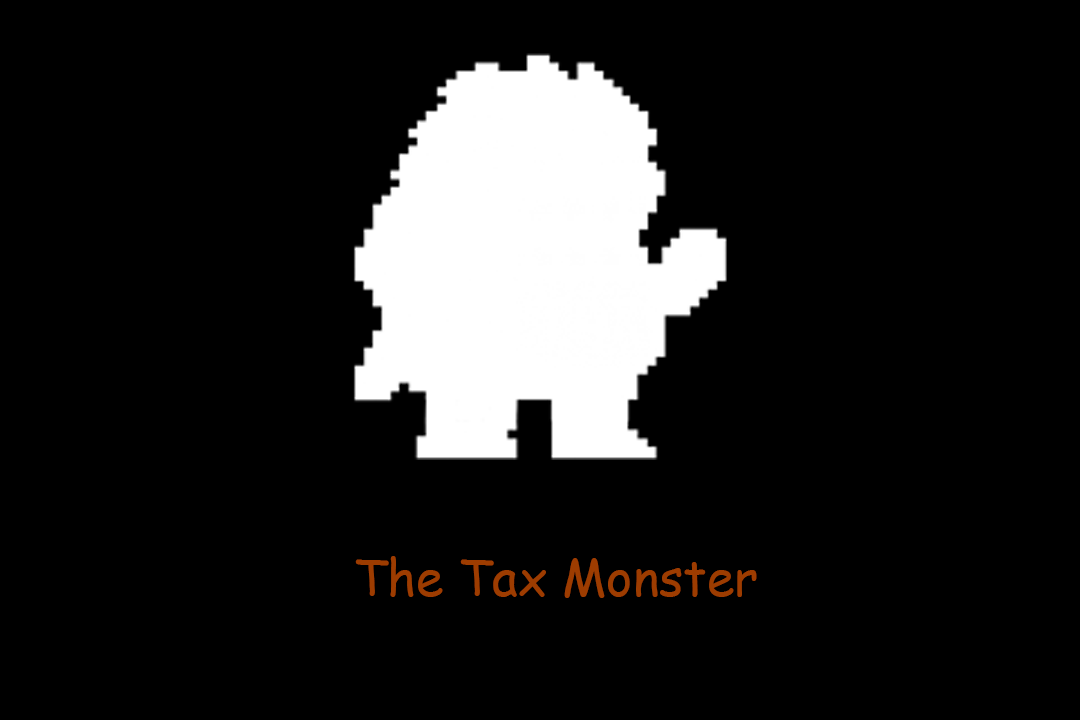
<style>
.page{position:relative;width:1080px;height:720px;background:#000000}
.page>*{position:absolute;margin:0}
.t1{font:50px "ComicSansMS";color:#9d3c00}
</style>
<div class="page">
<p class="t1" style="left:355px;top:556px;width:402px;height:42px">The Tax Monster</p>
</div>
